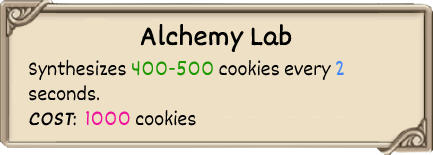
<style>
.page{position:relative;width:433px;height:155px;background:#ede0c4}
.page>*{position:absolute;margin:0}
.t1{font:29px "Dekko";color:#000000;font-weight:bold}
.t2{font:21px "Dekko";color:#000000}
.t3{font:21px "Dekko";color:#1b9902}
.t4{font:21px "Dekko";color:#4086fa}
.t5{font:21px "Dekko";color:#000000;font-weight:bold;font-style:italic}
.t6{font:21px "Dekko";color:#f0129a}
</style>
<div class="page">
<p class="t1" style="left:140px;top:23px;width:152px;height:30px">Alchemy Lab</p>
<p class="t2" style="left:29px;top:59px;width:315px;height:67px">Synthesizes <span class="t3">400-500 </span>cookies every <span class="t4">2<br></span>seconds.<br><span class="t5">COST</span>:  <span class="t6">1000 </span>cookies</p>
</div>
